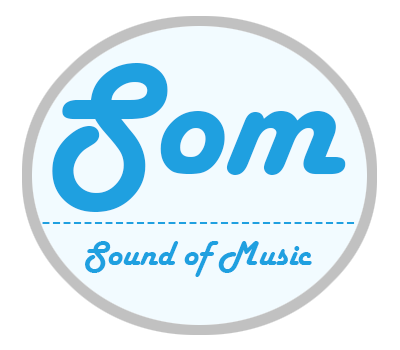
<style>
.page{position:relative;width:400px;height:350px;background:#f2fbff}
.page>*{position:absolute;margin:0}
.t1{font:165px "HarlowSolid";color:#1fa0e0}
.t2{font:14px "HarlowSolid";color:#1fa0e0}
.t3{font:36px "HarlowSolid";color:#1fa0e0}
</style>
<div class="page">
<p class="t1" style="left:52px;top:63px;width:294px;height:149px">Som</p>
<p class="t2" style="left:42px;top:222px;width:313px;height:2px">_ _ _ _ _ _ _ _ _ _ _ _ _ _ _ _ _ _ _ _ _ _ _ _ _ _ _ _ _ _</p>
<p class="t3" style="left:85px;top:241px;width:227px;height:36px">Sound of Music</p>
</div>
